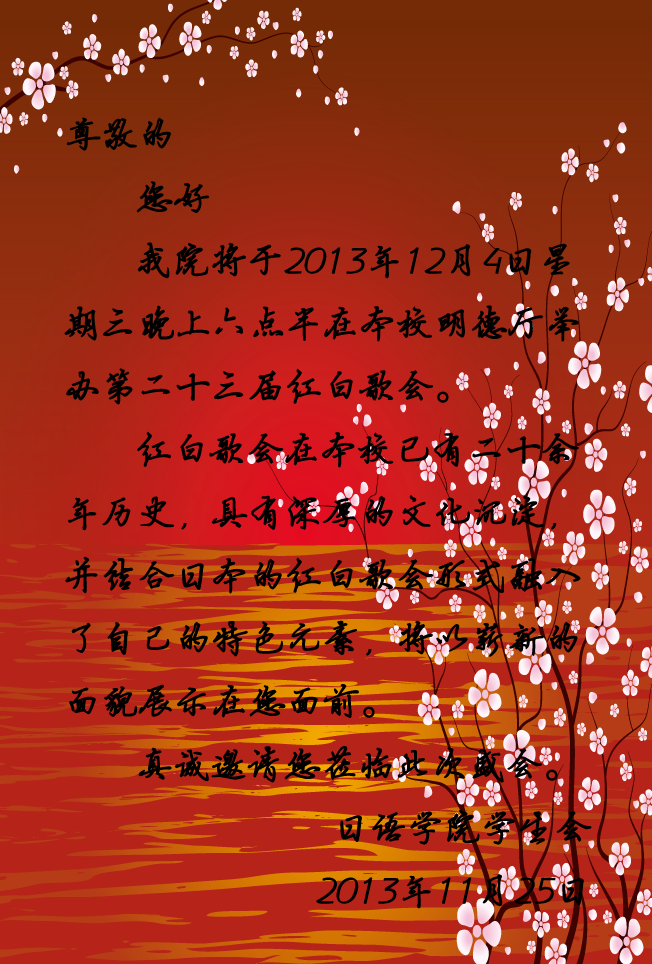
<style>
.page{position:relative;width:652px;height:964px;background:#b62318}
.page>*{position:absolute;margin:0}
.t1{font:36px "Jyinbixinsu";color:#000000;font-weight:bold}
</style>
<div class="page">
<p class="t1" style="left:64px;top:117px;width:528px;height:792px">尊敬的<br>您好<br>我院将于2013年12月4日星期三晚上六点半在本校明德厅举办第二十三届红白歌会。<br>红白歌会在本校已有二十余年历史，具有深厚的文化沉淀，并结合日本的红白歌会形式融入了自己的特色元素，将以崭新的面貌展示在您面前。<br>真诚邀请您莅临此次盛会。<br>日语学院学生会<br>2013年11月25日</p>
</div>
